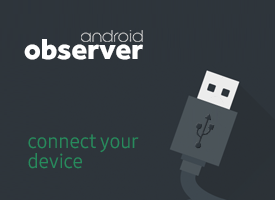
<style>
.page{position:relative;width:275px;height:200px;background:#2e353b}
.page>*{position:absolute;margin:0}
.t1{font:30px "Effra-Heavy";letter-spacing:-0.01em;color:#ffffff}
.t2{font:20px/20px "SamsungOne-400";letter-spacing:-0.01em;color:#278b5d}
</style>
<div class="page">
<p class="t1" style="left:24px;top:39px;width:119px;height:21px">observer</p>
<p class="t2" style="left:28px;top:134px;width:111px;height:35px">connect your <br>device</p>
</div>
